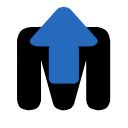
<style>
.page{position:relative;width:128px;height:128px;background:#ffffff}
.page>*{position:absolute;margin:0}
.t1{font:118px "Reeji-CloudHuPo-GB-Regular";color:#000000}
</style>
<div class="page">
<p class="t1" style="left:17px;top:26px;width:94px;height:85px">M</p>
</div>
